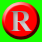
<style>
.page{position:relative;width:42px;height:42px;background:#18ff00}
.page>*{position:absolute;margin:0}
.t1{font:30px "TimesNewRomanPS-BoldMT";color:#bdbdbd}
</style>
<div class="page">
<p class="t1" style="left:10px;top:11px;width:22px;height:20px">R</p>
</div>
